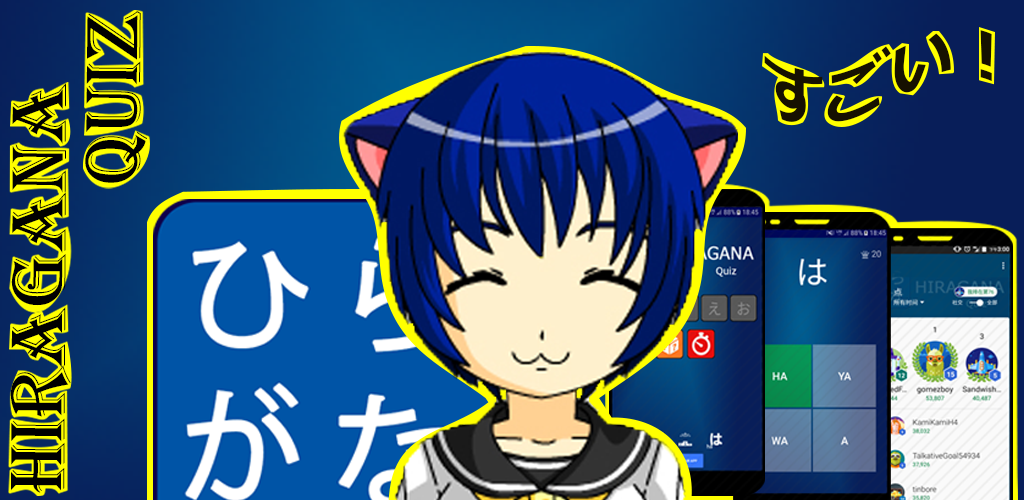
<style>
.page{position:relative;width:1024px;height:500px}
.page>*{position:absolute;margin:0}
.t1{font:80px "Algerian";color:#000000}
.t2{font:64px "Meiryo-Bold";color:#161101}
</style>
<div class="page">
<p class="t1" style="left:85px;top:11px;width:62px;height:172px;rotate:-89deg">Quiz</p>
<p class="t2" style="left:764px;top:30px;width:228px;height:92px">すごい！</p>
<p class="t1" style="left:10px;top:83px;width:61px;height:410px;rotate:-90deg">Hiragana</p>
</div>
